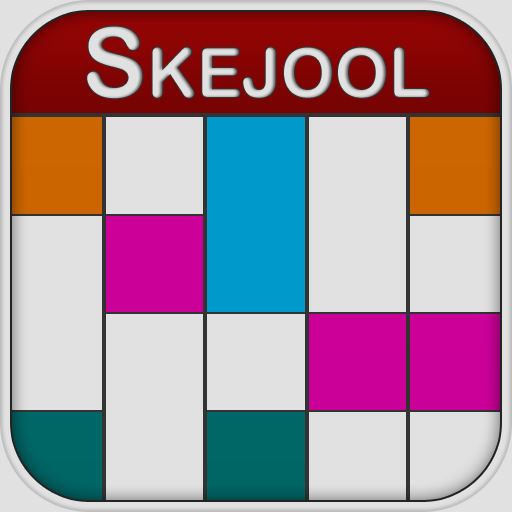
<style>
.page{position:relative;width:512px;height:512px;background:#e1e1e1}
.page>*{position:absolute;margin:0}
.t1{font:97.1px "ArialRoundedMTBold";color:#e0e0e0;font-variant:small-caps}
</style>
<div class="page">
<p class="t1" style="left:87px;top:26px;width:342px;height:73px">Skejool</p>
</div>
